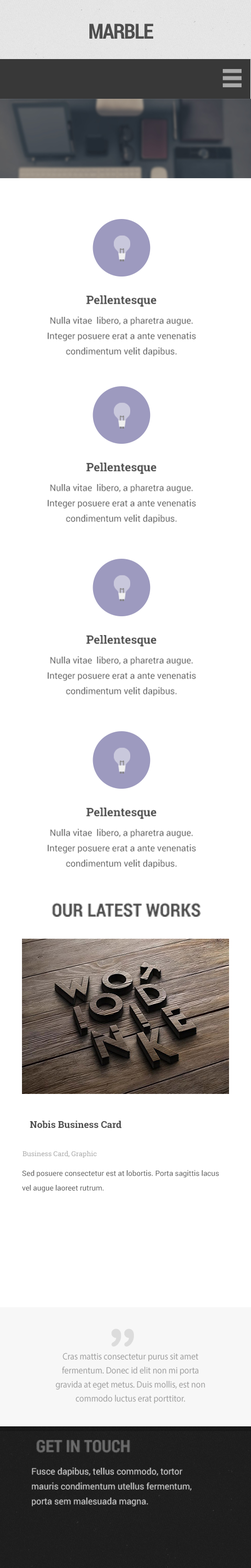
<style>
.page{position:relative;width:251px;height:1568px;background:#ffffff}
.page>*{position:absolute;margin:0}
.t1{font:20.9px "RobotoCondensed-Bold";letter-spacing:-0.05em;color:#4e4e4e;text-transform:uppercase}
.t2{font:11.5px "RobotoSlab-Bold";color:#4e4e4e}
.t3{font:9px/15.3px "Roboto-Regular";color:#616161}
.t4{font:18.1px "RobotoCondensed-Bold";color:#4e4e4e;text-transform:uppercase}
.t5{font:9.4px "RobotoSlab-Bold";color:#4e4e4e}
.t6{font:6.8px "RobotoSlab-Regular";color:#a8a8a8}
.t7{font:7.3px/14.6px "Roboto-Regular";color:#5c5c5c}
.t8{font:59.8px "ArialRoundedMTBold";letter-spacing:-0.05em;color:#dcdcdc}
.t9{font:9.4px/14px "MyriadPro-Regular";color:#a1a1a1;scale:0.91 1}
.t10{font:16.8px "RobotoCondensed-Bold";color:#6c6c6c;text-transform:uppercase}
.t11{font:8.7px/14.9px "Roboto-Regular";color:#cacaca}
</style>
<div class="page">
<p class="t1" style="left:89px;top:24px;width:64px;height:15px">Marble</p>
<p class="t2" style="left:86px;top:295px;width:70px;height:12px">Pellentesque</p>
<p class="t3" style="left:48px;top:316px;width:148px;height:40px;text-align:center">Nulla vitae  libero, a pharetra augue. Integer posuere erat a ante venenatis condimentum velit dapibus.</p>
<p class="t2" style="left:86px;top:463px;width:70px;height:11px">Pellentesque</p>
<p class="t3" style="left:48px;top:483px;width:148px;height:41px;text-align:center">Nulla vitae  libero, a pharetra augue. Integer posuere erat a ante venenatis condimentum velit dapibus.</p>
<p class="t2" style="left:86px;top:635px;width:70px;height:12px">Pellentesque</p>
<p class="t3" style="left:48px;top:656px;width:148px;height:40px;text-align:center">Nulla vitae  libero, a pharetra augue. Integer posuere erat a ante venenatis condimentum velit dapibus.</p>
<p class="t2" style="left:86px;top:808px;width:70px;height:11px">Pellentesque</p>
<p class="t3" style="left:48px;top:828px;width:148px;height:41px;text-align:center">Nulla vitae  libero, a pharetra augue. Integer posuere erat a ante venenatis condimentum velit dapibus.</p>
<p class="t4" style="left:52px;top:903px;width:149px;height:14px">Our Latest Works</p>
<p class="t5" style="left:30px;top:1121px;width:92px;height:7px">Nobis Business Card</p>
<p class="t6" style="left:22px;top:1151px;width:75px;height:7px">Business Card, Graphic</p>
<p class="t7" style="left:22px;top:1170px;width:197px;height:22px">Sed posuere consectetur est at lobortis. Porta sagittis lacus vel augue laoreet rutrum.</p>
<p class="t8" style="left:111px;top:1329px;width:23px;height:18px">”</p>
<p class="t9" style="left:55px;top:1353px;width:150px;height:50px;text-align:center">Cras mattis consectetur purus sit amet fermentum. Donec id elit non mi porta gravida at eget metus. Duis mollis, est non commodo luctus erat porttitor.</p>
<p class="t10" style="left:36px;top:1440px;width:94px;height:13px">Get In Touch</p>
<p class="t11" style="left:32px;top:1467px;width:159px;height:39px">Fusce dapibus, tellus commodo, tortor mauris condimentum utellus fermentum, porta sem malesuada magna.</p>
</div>
